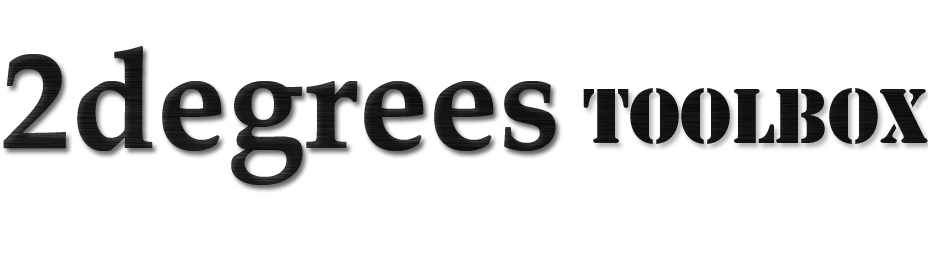
<style>
.page{position:relative;width:928px;height:268px;background:#ffffff}
.page>*{position:absolute;margin:0}
.t1{font:140px "PalatinoLinotype-Bold";color:#1a1a1a}
.t2{font:72px "StencilStd";color:#000000}
</style>
<div class="page">
<p class="t1" style="left:3px;top:46px;width:553px;height:139px">2degrees</p>
<p class="t2" style="left:583px;top:88px;width:345px;height:56px">TOOLBOX</p>
</div>
